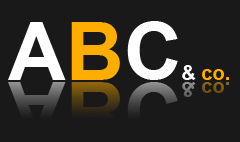
<style>
.page{position:relative;width:240px;height:142px;background:#191919}
.page>*{position:absolute;margin:0}
.t1{font:20px "Arial-BoldMT";color:#ffae01}
.t2{font:80px "Arial-BoldMT";color:#ffffff}
.t3{font:80px "Arial-BoldMT";color:#ffae01}
.t4{font:20px "Arial-BoldMT";color:#ffffff}
.t5{font:20px "Arial-BoldMT"}
.t6{font:80px "Arial-BoldMT"}
</style>
<div class="page">
<p class="t1" style="left:8px;top:21px;width:221px;height:59px"><span class="t2">A</span><span class="t3">B</span><span class="t2">C</span><span class="t4">&amp; </span>co.</p>
<p class="t5" style="left:8px;top:82px;width:221px;height:59px"><span class="t6">A</span><span class="t6">B</span><span class="t6">C</span>&amp; co.</p>
</div>
